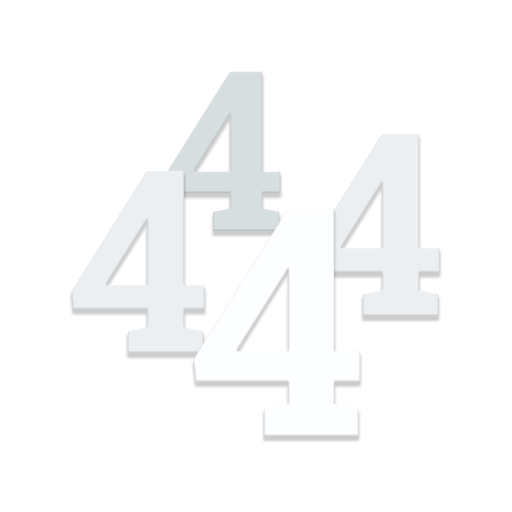
<style>
.page{position:relative;width:512px;height:512px;background:#ffffff}
.page>*{position:absolute;margin:0}
.t1{font:224px "RobotoSlab-Bold";color:#d7dee0}
.t2{font:256px "RobotoSlab-Bold";color:#eceff1}
</style>
<div class="page">
<p class="t1" style="left:163px;top:71px;width:118px;height:160px">4</p>
<p class="t2" style="left:306px;top:134px;width:134px;height:182px">4</p>
<p class="t2" style="left:71px;top:171px;width:134px;height:182px">4</p>
</div>
